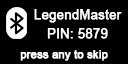
<style>
.page{position:relative;width:128px;height:64px;background:#000000}
.page>*{position:absolute;margin:0}
.t1{font:13px/19px "ArialMT";color:#ffffff;font-weight:bold}
.t2{font:11px "ArialMT";color:#ffffff;font-weight:bold}
</style>
<div class="page">
<p class="t1" style="left:34px;top:9px;width:88px;height:30px;text-align:center">LegendMaster<br>PIN: 5879</p>
<p class="t2" style="left:20px;top:50px;width:88px;height:11px">press any to skip</p>
</div>
